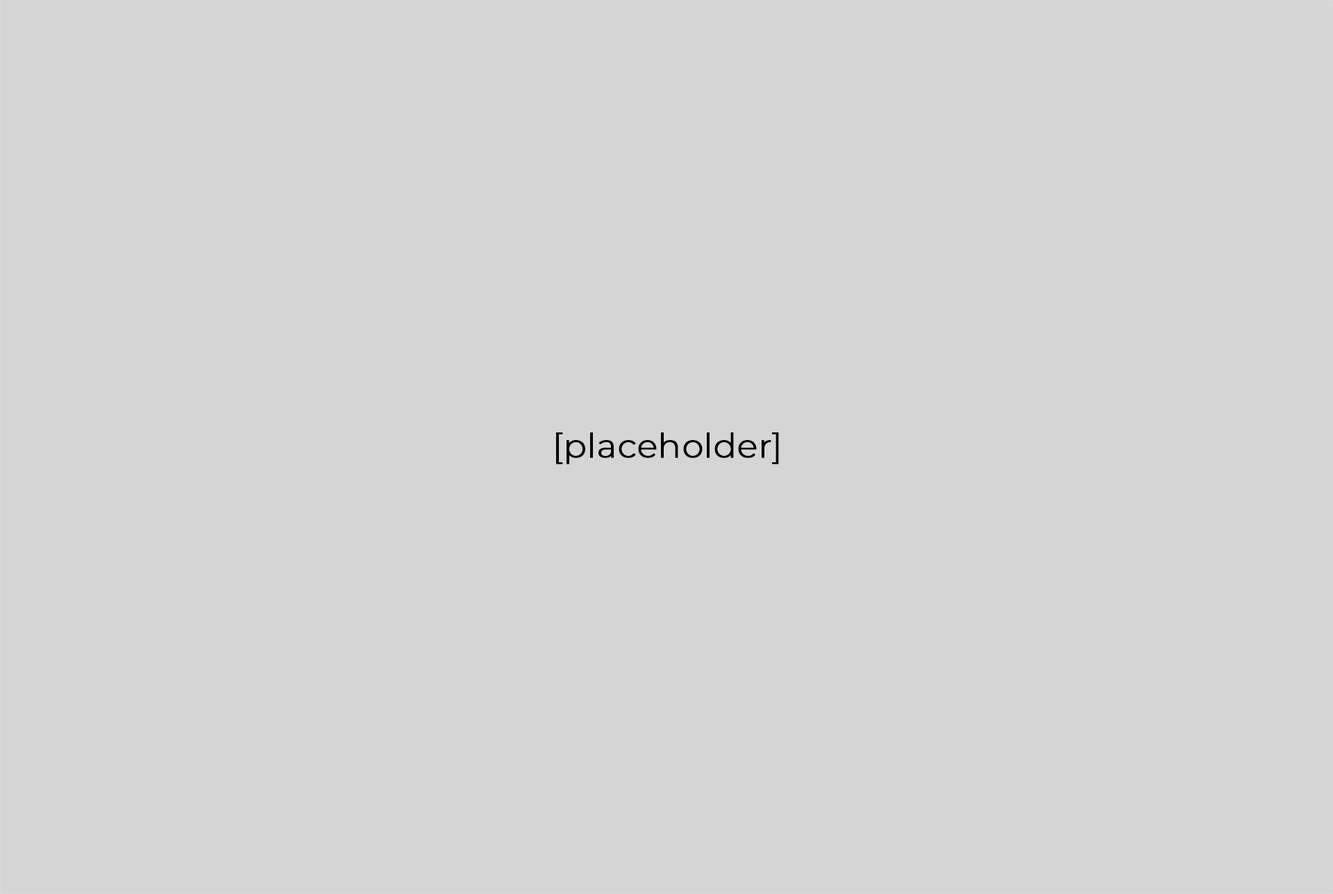
<style>
.page{position:relative;width:1333px;height:894px;background:#d5d5d5}
.page>*{position:absolute;margin:0}
.t1{font:33.9px "Montserrat-Light";color:#000000;font-weight:bold}
</style>
<div class="page">
<p class="t1" style="left:556px;top:433px;width:223px;height:32px">[placeholder]</p>
</div>
